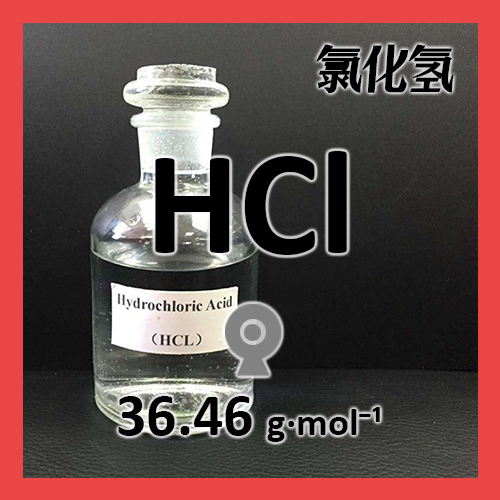
<style>
.page{position:relative;width:500px;height:500px}
.page>*{position:absolute;margin:0}
.t1{font:48px "ZoomlaShuaisongA028";color:#000000;font-weight:bold;scale:0.93 1}
.t2{font:150px "Calibri-Bold";color:#000000}
.t3{font:39px "Calibri-Bold";color:#000000}
.t4{font:60px "Calibri-Bold";color:#000000}
</style>
<div class="page">
<p class="t1" style="left:316px;top:44px;width:138px;height:50px">氯化氢</p>
<p class="t2" style="left:155px;top:151px;width:192px;height:104px">HCl</p>
<p class="t3" style="left:118px;top:396px;width:262px;height:46px"><span class="t4">36.46 </span>g·mol⁻¹</p>
</div>
